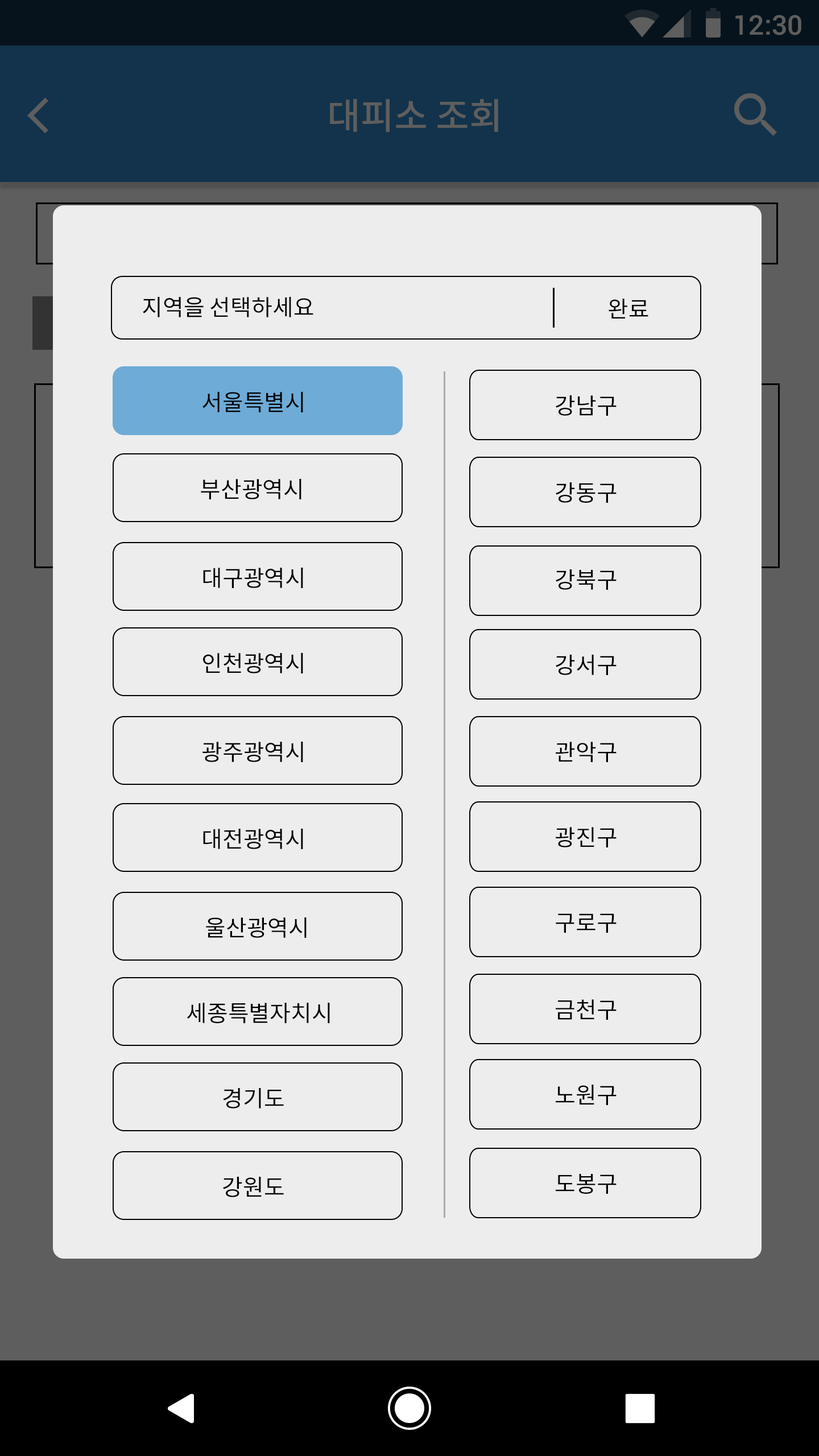
<style>
.page{position:relative;width:819px;height:1456px;background:#ededed}
.page>*{position:absolute;margin:0}
.t1{font:27.3px "Roboto-Medium";color:#5e5e5e}
.t2{font:36.4px "NotoSansCJKkr-Medium";color:#5e5e5e}
.t3{font:22.7px "NotoSansCJKkr-Regular";color:#000000}
</style>
<div class="page">
<p class="t1" style="left:735px;top:15px;width:66px;height:20px">12:30</p>
<p class="t2" style="left:330px;top:99px;width:168px;height:33px">대피소 조회</p>
<p class="t3" style="left:143px;top:297px;width:170px;height:20px">지역을 선택하세요</p>
<p class="t3" style="left:609px;top:299px;width:39px;height:19px">완료</p>
<p class="t3" style="left:202px;top:392px;width:101px;height:20px">서울특별시</p>
<p class="t3" style="left:556px;top:395px;width:61px;height:21px">강남구</p>
<p class="t3" style="left:201px;top:479px;width:100px;height:20px">부산광역시</p>
<p class="t3" style="left:556px;top:482px;width:61px;height:21px">강동구</p>
<p class="t3" style="left:203px;top:568px;width:100px;height:20px">대구광역시</p>
<p class="t3" style="left:556px;top:569px;width:61px;height:21px">강북구</p>
<p class="t3" style="left:203px;top:653px;width:100px;height:20px">인천광역시</p>
<p class="t3" style="left:556px;top:655px;width:61px;height:20px">강서구</p>
<p class="t3" style="left:202px;top:742px;width:101px;height:20px">광주광역시</p>
<p class="t3" style="left:556px;top:742px;width:61px;height:20px">관악구</p>
<p class="t3" style="left:203px;top:829px;width:100px;height:20px">대전광역시</p>
<p class="t3" style="left:556px;top:827px;width:61px;height:20px">광진구</p>
<p class="t3" style="left:206px;top:917px;width:101px;height:21px">울산광역시</p>
<p class="t3" style="left:556px;top:913px;width:61px;height:20px">구로구</p>
<p class="t3" style="left:556px;top:999px;width:61px;height:21px">금천구</p>
<p class="t3" style="left:187px;top:1003px;width:143px;height:20px">세종특별자치시</p>
<p class="t3" style="left:556px;top:1085px;width:61px;height:20px">노원구</p>
<p class="t3" style="left:223px;top:1088px;width:61px;height:20px">경기도</p>
<p class="t3" style="left:223px;top:1177px;width:61px;height:20px">강원도</p>
<p class="t3" style="left:556px;top:1174px;width:61px;height:20px">도봉구</p>
</div>
